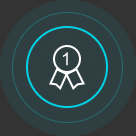
<style>
.page{position:relative;width:136px;height:136px;background:#2f3f41}
.page>*{position:absolute;margin:0}
.t1{font:18px "ArialMT";color:#ffffff}
</style>
<div class="page">
<p class="t1" style="left:63px;top:52px;width:5px;height:14px">1</p>
</div>
